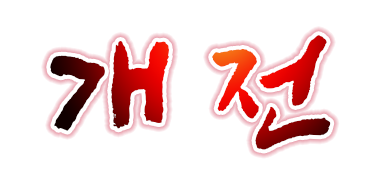
<style>
.page{position:relative;width:381px;height:185px;background:#ffffff}
.page>*{position:absolute;margin:0}
.t1{font:157.9px "SangSangRockOTF";letter-spacing:0.26em}
.t2{font:141.9px "SangSangRockOTF";letter-spacing:0.26em}
</style>
<div class="page">
<p class="t1" style="left:50px;top:35px;width:281px;height:115px">개<span class="t2">전</span></p>
</div>
